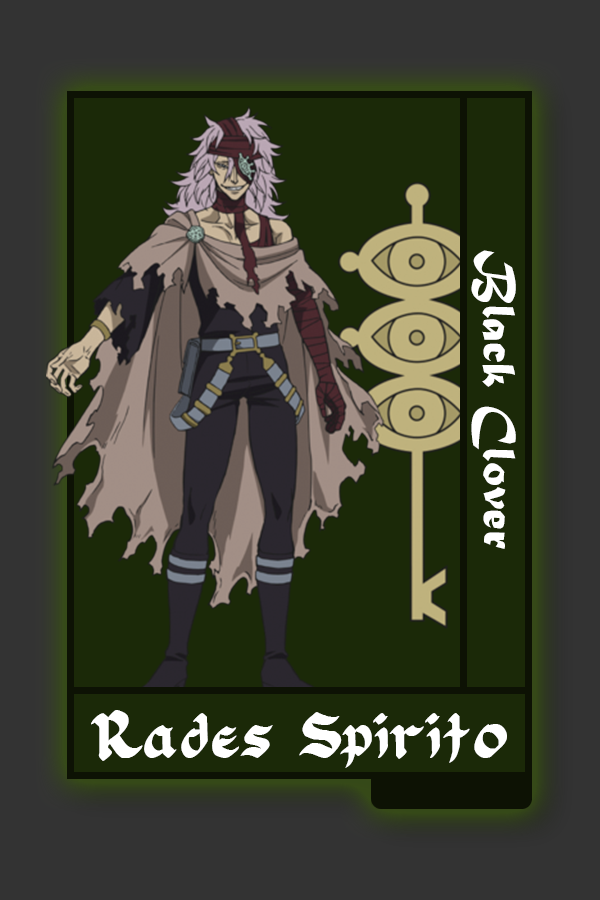
<style>
.page{position:relative;width:600px;height:900px;background:#1b2908}
.page>*{position:absolute;margin:0}
.t1{font:48.8px "MaturaMTScriptCapitals";color:#ffffff}
.t2{font:54.8px "FloranteatLaura";color:#ffffff}
</style>
<div class="page">
<p class="t1" style="left:471px;top:250px;width:45px;height:299px;rotate:90deg">Black Clover</p>
<p class="t2" style="left:91px;top:710px;width:416px;height:58px">Rades Spirito</p>
</div>
